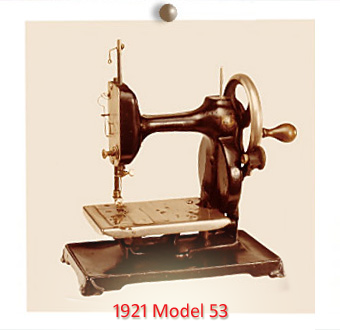
<style>
.page{position:relative;width:340px;height:330px;background:#f2e5d5}
.page>*{position:absolute;margin:0}
.t1{font:20px "Calibri";color:#ef171e}
</style>
<div class="page">
<p class="t1" style="left:113px;top:303px;width:115px;height:15px">1921 Model 53</p>
</div>
